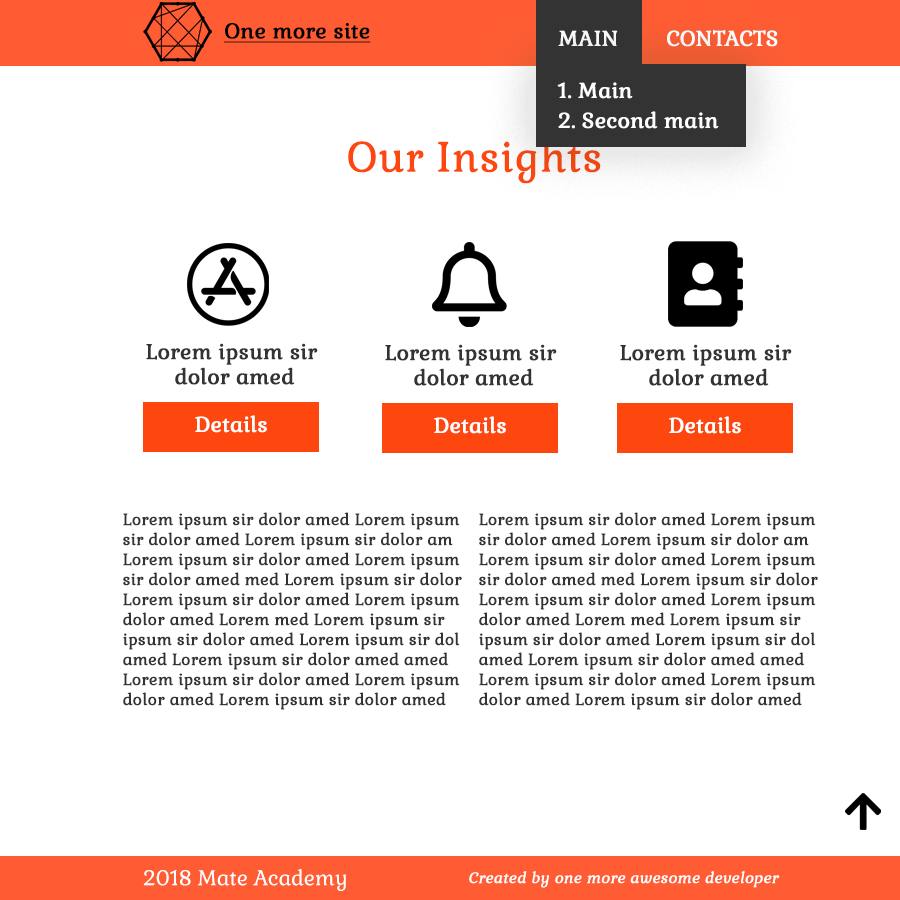
<style>
.page{position:relative;width:900px;height:900px;background:#ffffff}
.page>*{position:absolute;margin:0}
.t1{font:21px "Gabriela-Regular";color:#000000;font-weight:bold;text-decoration:underline}
.t2{font:21px "Gabriela-Regular";color:#000000;text-transform:uppercase;font-weight:bold;text-decoration:underline}
.t3{font:21px "Gabriela-Regular";color:#ffffff;text-transform:uppercase;font-weight:bold}
.t4{font:21px/30px "Gabriela-Regular";color:#ffffff;font-weight:bold}
.t5{font:41px "Gabriela-Regular";color:#fe470f;font-weight:bold}
.t6{font:21px/25px "Gabriela-Regular";color:#333333;font-weight:bold}
.t7{font:21px "Gabriela-Regular";color:#ffffff;font-weight:bold}
.t8{font:16px/20px "Gabriela-Regular";color:#333333;font-weight:bold}
.t9{font:21px "Gabriela-Regular";color:#ffffff}
.t10{font:15px "Gabriela-Regular";color:#ffffff;font-weight:bold;font-style:italic}
</style>
<div class="page">
<p class="t1" style="left:224px;top:23px;width:147px;height:20px"><span class="t2">O</span>ne more site</p>
<p class="t3" style="left:558px;top:30px;width:220px;height:17px">Main  Contacts</p>
<p class="t4" style="left:557px;top:82px;width:162px;height:47px">1. Main<br>2. Second main</p>
<p class="t5" style="left:348px;top:139px;width:253px;height:45px">Our Insights</p>
<p class="t6" style="left:146px;top:343px;width:172px;height:42px;text-align:center">Lorem ipsum sir <br>dolor amed</p>
<p class="t6" style="left:385px;top:344px;width:172px;height:42px;text-align:center">Lorem ipsum sir <br>dolor amed</p>
<p class="t6" style="left:620px;top:344px;width:172px;height:42px;text-align:center">Lorem ipsum sir <br>dolor amed</p>
<p class="t7" style="left:195px;top:415px;width:72px;height:18px">Details</p>
<p class="t7" style="left:434px;top:416px;width:72px;height:18px">Details</p>
<p class="t7" style="left:669px;top:416px;width:72px;height:18px">Details</p>
<p class="t8" style="left:123px;top:512px;width:339px;height:198px">Lorem ipsum sir dolor amed Lorem ipsum <br>sir dolor amed Lorem ipsum sir dolor am<br>Lorem ipsum sir dolor amed Lorem ipsum <br>sir dolor amed med Lorem ipsum sir dolor <br>Lorem ipsum sir dolor amed Lorem ipsum <br>dolor amed Lorem med Lorem ipsum sir <br>ipsum sir dolor amed Lorem ipsum sir dol<br>amed Lorem ipsum sir dolor amed amed<br>Lorem ipsum sir dolor amed Lorem ipsum  <br>dolor amed Lorem ipsum sir dolor amed</p>
<p class="t8" style="left:479px;top:512px;width:339px;height:198px">Lorem ipsum sir dolor amed Lorem ipsum <br>sir dolor amed Lorem ipsum sir dolor am<br>Lorem ipsum sir dolor amed Lorem ipsum <br>sir dolor amed med Lorem ipsum sir dolor <br>Lorem ipsum sir dolor amed Lorem ipsum <br>dolor amed Lorem med Lorem ipsum sir <br>ipsum sir dolor amed Lorem ipsum sir dol<br>amed Lorem ipsum sir dolor amed amed<br>Lorem ipsum sir dolor amed Lorem ipsum  <br>dolor amed Lorem ipsum sir dolor amed</p>
<p class="t9" style="left:143px;top:869px;width:203px;height:22px">2018 Mate Academy</p>
<p class="t10" style="left:469px;top:871px;width:311px;height:17px">Created by one more awesome developer</p>
</div>
